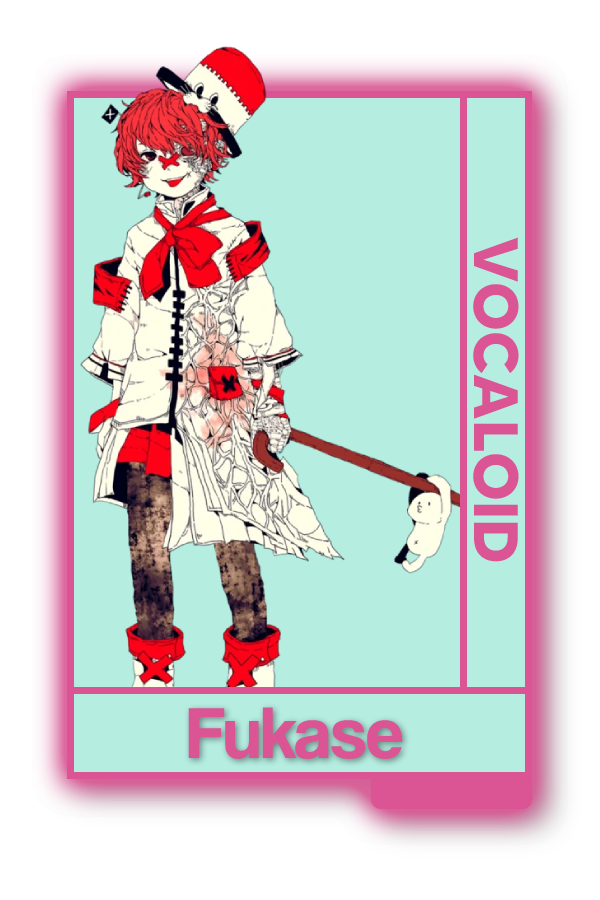
<style>
.page{position:relative;width:600px;height:900px;background:#b5ede1}
.page>*{position:absolute;margin:0}
.t1{font:62.5px "MADETOMMY-Bold";color:#db5493}
.t2{font:75px "CoolveticaRg-Regular";color:#db5493}
</style>
<div class="page">
<p class="t1" style="left:473px;top:237px;width:46px;height:325px;rotate:90deg">VOCALOID</p>
<p class="t2" style="left:188px;top:707px;width:215px;height:52px">Fukase</p>
</div>
